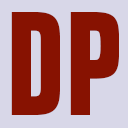
<style>
.page{position:relative;width:128px;height:128px;background:#d8d7e8}
.page>*{position:absolute;margin:0}
.t1{font:144.1px "Folio-BoldCondensed";color:#871201;scale:0.91 1}
</style>
<div class="page">
<p class="t1" style="left:11px;top:12px;width:108px;height:103px">DP</p>
</div>
